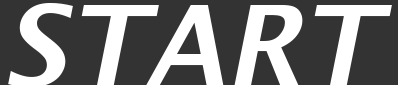
<style>
.page{position:relative;width:398px;height:85px;background:#333333}
.page>*{position:absolute;margin:0}
.t1{font:111.1px "LucidaSans-DemiItalic";color:#ffffff}
</style>
<div class="page">
<p class="t1" style="left:8px;top:3px;width:384px;height:84px">START</p>
</div>
